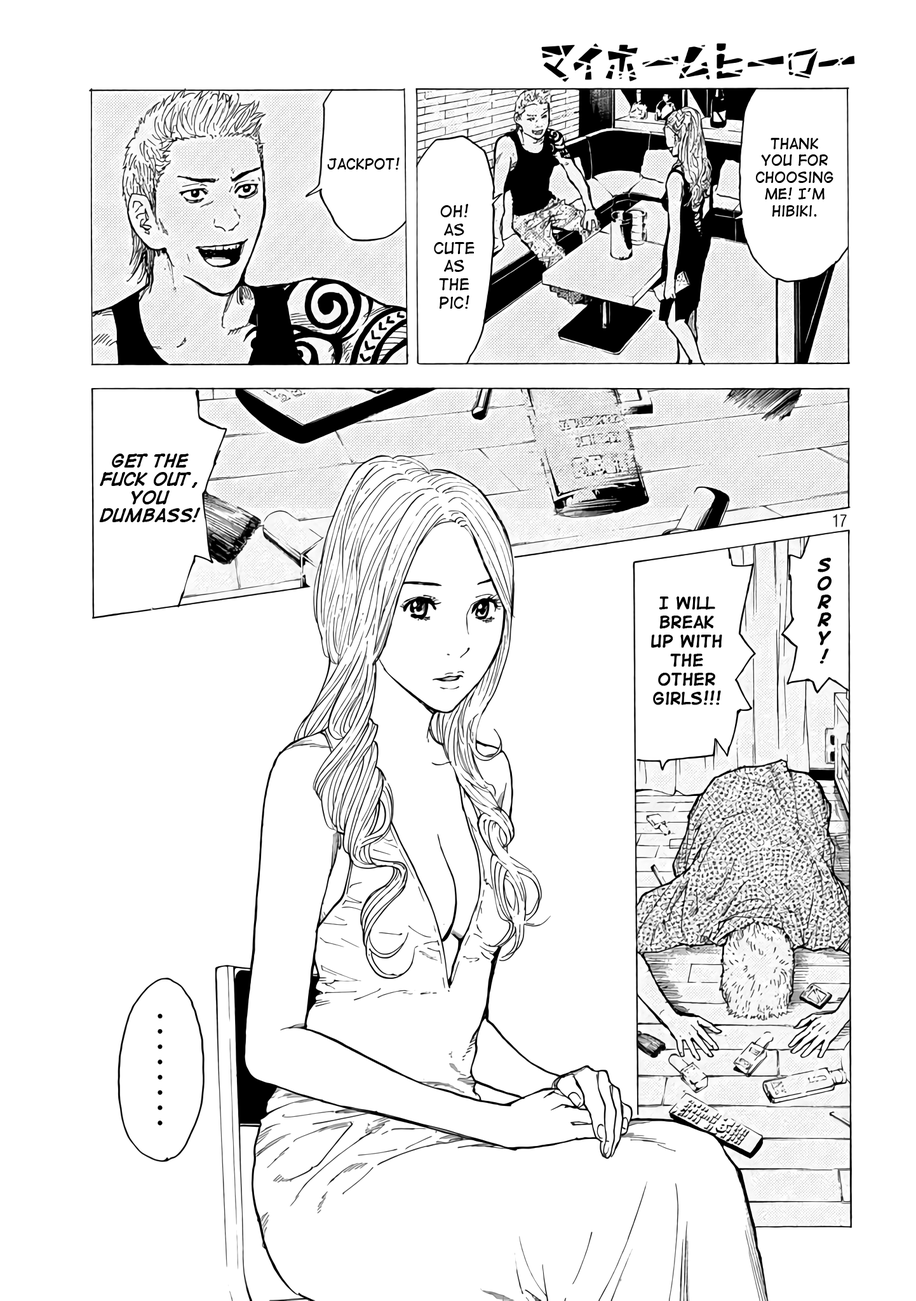
<style>
.page{position:relative;width:916px;height:1301px;background:#ffffff}
.page>*{position:absolute;margin:0}
.t1{font:14px "DigitalStrip";color:#000000}
.t2{font:15.3px "DigitalStrip";color:#000000}
.t3{font:15.3px "DigitalStripBold";color:#000000}
.t4{font:15.3px "DigitalStripBold";color:#000000;font-weight:bold}
.t5{font:15.9px "DigitalStrip";color:#000000;font-weight:bold}
</style>
<div class="page">
<p class="t1" style="left:756px;top:138px;width:78px;height:79px;text-align:center">Thank<br>you for<br>choosing<br>me! I’m<br>Hibiki.</p>
<p class="t1" style="left:327px;top:158px;width:73px;height:12px">jackpot!</p>
<p class="t2" style="left:434px;top:204px;width:41px;height:105px;text-align:center">Oh!<br>as<br>cute<br>as<br>the<br>pic!</p>
<p class="t3" style="left:99px;top:454px;width:102px;height:68px;text-align:center">Get the<br>fuck out,<br>you<br>dumbass!</p>
<p class="t4" style="left:818px;top:558px;width:14px;height:106px;text-align:center">S<br>O<br>R<br>R<br>Y<br>!</p>
<p class="t5" style="left:651px;top:597px;width:71px;height:108px;text-align:center">I will<br>break<br>up with<br>the<br>other<br>girls!!!</p>
</div>
